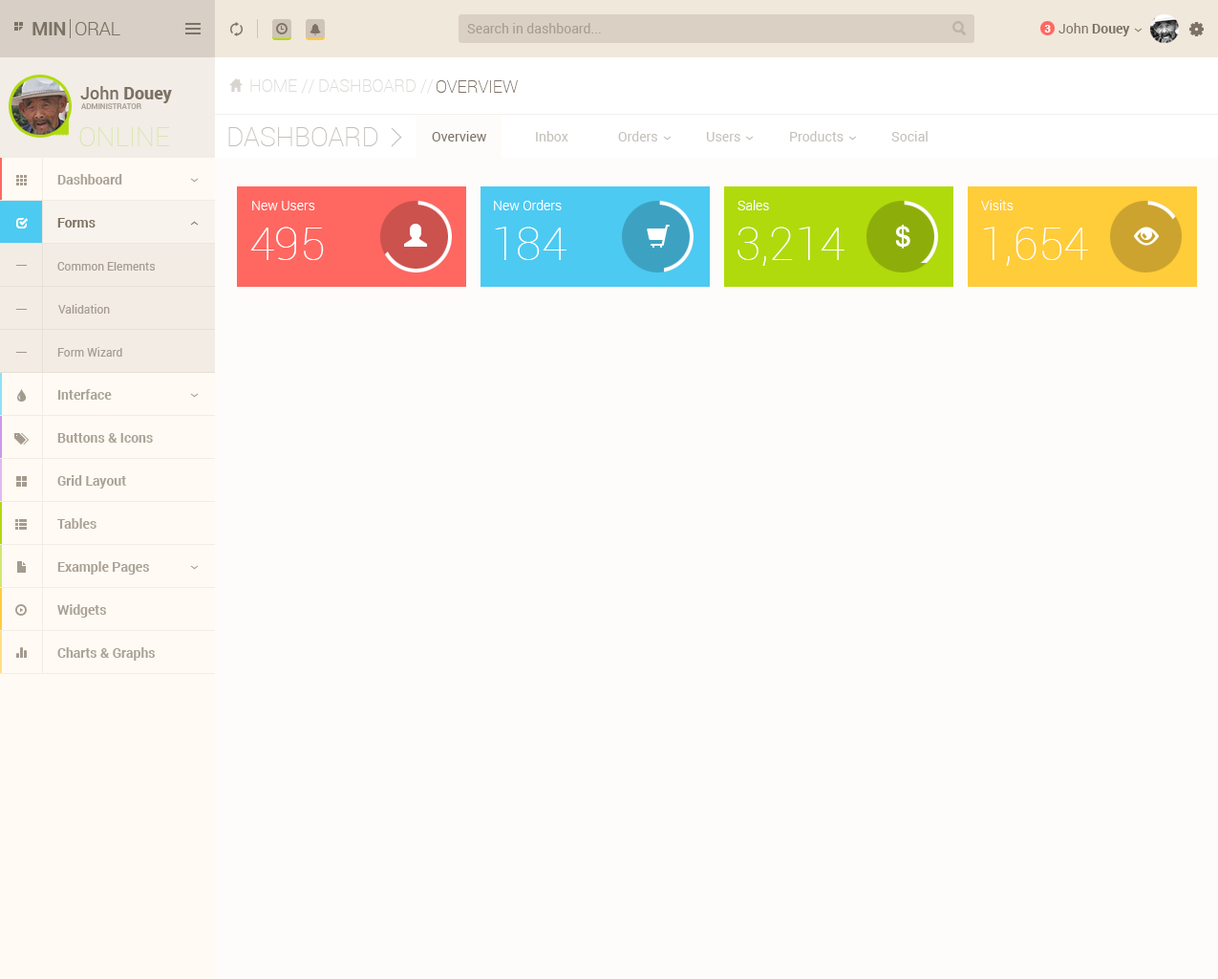
<style>
.page{position:relative;width:1218px;height:979px;background:#fdfcfa}
.page>*{position:absolute;margin:0}
.t1{font:19.1px "Roboto-Light";letter-spacing:-0.025em;color:#7d7264}
.t2{font:19.1px "Roboto-Bold";letter-spacing:-0.025em;color:#7d7264}
.t3{font:13.4px "Roboto-Regular";color:#a69c8f}
.t4{font:10.5px "Roboto-Black";color:#ffffff}
.t5{font:13.4px "Roboto-Bold";color:#7d7264}
.t6{font:13.4px "Roboto-Regular";color:#7d7264}
.t7{font:17.2px "Roboto-Black";color:#7d7264}
.t8{font:17.2px "Roboto-Medium";color:#7d7264}
.t9{font:17.2px "Roboto-Thin";color:#dddbd8}
.t10{font:17.2px "Roboto-Thin";color:#7d7264}
.t11{font:7.6px "Roboto-Medium";color:#a59d92;text-transform:uppercase}
.t12{font:26.8px "Roboto-Thin";color:#d9e6a8;text-transform:uppercase}
.t13{font:26.8px "Roboto-Thin";color:#c4c0bb;text-transform:uppercase}
.t14{font:13.4px "Roboto-Regular";color:#c4c0bb}
.t15{font:13.4px "Roboto-Bold";color:#aaa297}
.t16{font:13.4px "Roboto-Light";color:#ffffff}
.t17{font:45.9px "Roboto-Thin";color:#ffffff}
.t18{font:11.5px "Roboto-Regular";color:#a59c92}
</style>
<div class="page">
<p class="t1" style="left:32px;top:22px;width:88px;height:13px"><span class="t2">MIN  </span>ORAL</p>
<p class="t3" style="left:467px;top:23px;width:134px;height:10px">Search in dashboard...</p>
<p class="t4" style="left:1045px;top:25px;width:6px;height:7px">3</p>
<p class="t5" style="left:1059px;top:23px;width:72px;height:13px"><span class="t6">John </span>Douey</p>
<p class="t7" style="left:80px;top:86px;width:92px;height:17px"><span class="t8">John </span>Douey</p>
<p class="t9" style="left:250px;top:79px;width:64px;height:15px">HOME //</p>
<p class="t9" style="left:319px;top:79px;width:115px;height:15px">DASHBOARD //</p>
<p class="t10" style="left:437px;top:80px;width:81px;height:13px">OVERVIEW</p>
<p class="t11" style="left:81px;top:103px;width:60px;height:7px">administrator</p>
<p class="t12" style="left:79px;top:127px;width:90px;height:19px">online</p>
<p class="t13" style="left:228px;top:127px;width:150px;height:19px">Dashboard</p>
<p class="t6" style="left:432px;top:131px;width:54px;height:10px">Overview</p>
<p class="t14" style="left:536px;top:131px;width:33px;height:10px">Inbox</p>
<p class="t14" style="left:618px;top:131px;width:40px;height:10px">Orders</p>
<p class="t14" style="left:706px;top:132px;width:35px;height:9px">Users</p>
<p class="t14" style="left:790px;top:131px;width:54px;height:10px">Products</p>
<p class="t14" style="left:892px;top:131px;width:36px;height:10px">Social</p>
<p class="t15" style="left:57px;top:174px;width:65px;height:10px">Dashboard</p>
<p class="t16" style="left:252px;top:201px;width:63px;height:9px">New Users</p>
<p class="t16" style="left:494px;top:200px;width:68px;height:10px">New Orders</p>
<p class="t16" style="left:738px;top:200px;width:31px;height:10px">Sales</p>
<p class="t16" style="left:981px;top:200px;width:33px;height:10px">Visits</p>
<p class="t5" style="left:57px;top:218px;width:39px;height:9px">Forms</p>
<p class="t17" style="left:250px;top:226px;width:74px;height:34px">495</p>
<p class="t17" style="left:495px;top:226px;width:72px;height:34px">184</p>
<p class="t17" style="left:738px;top:226px;width:107px;height:40px">3,214</p>
<p class="t17" style="left:983px;top:226px;width:106px;height:40px">1,654</p>
<p class="t18" style="left:57px;top:262px;width:98px;height:8px">Common Elements</p>
<p class="t18" style="left:58px;top:304px;width:52px;height:9px">Validation</p>
<p class="t18" style="left:57px;top:347px;width:65px;height:9px">Form Wizard</p>
<p class="t15" style="left:57px;top:389px;width:55px;height:10px">Interface</p>
<p class="t15" style="left:57px;top:433px;width:96px;height:9px">Buttons &amp; Icons</p>
<p class="t15" style="left:57px;top:475px;width:69px;height:13px">Grid Layout</p>
<p class="t15" style="left:57px;top:518px;width:40px;height:10px">Tables</p>
<p class="t15" style="left:57px;top:561px;width:92px;height:13px">Example Pages</p>
<p class="t15" style="left:57px;top:604px;width:49px;height:13px">Widgets</p>
<p class="t15" style="left:57px;top:647px;width:98px;height:13px">Charts &amp; Graphs</p>
</div>
